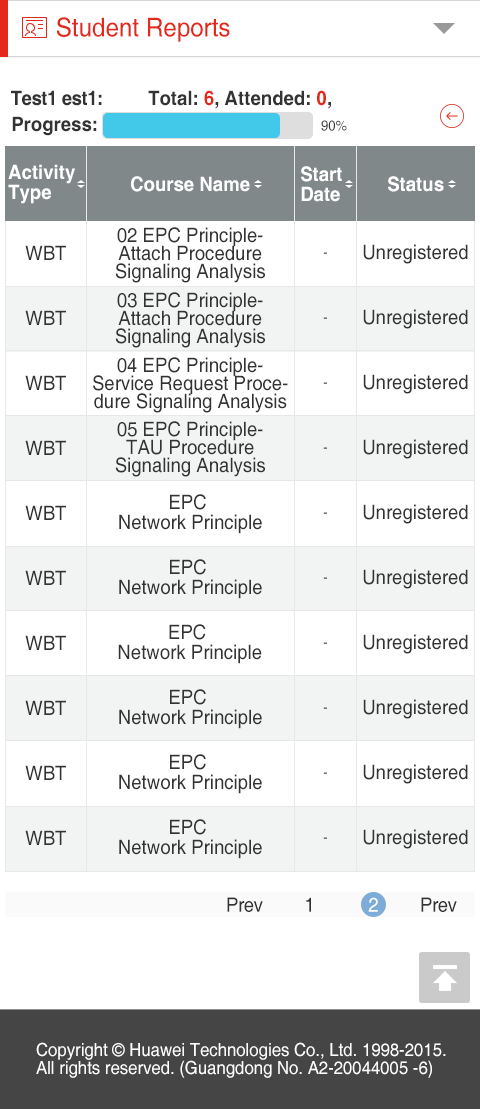
<style>
.page{position:relative;width:480px;height:1109px;background:#ffffff}
.page>*{position:absolute;margin:0}
.t1{font:26px "Helvetica";color:#e2291c;scale:0.93 1}
.t2{font:20px "Helvetica-Bold";letter-spacing:-0.025em;color:#333333;scale:0.93 1}
.t3{font:20px "Helvetica-Bold";color:#333333;scale:0.93 1}
.t4{font:20px "Helvetica-Bold";color:#e2291c;scale:0.93 1}
.t5{font:14px "Helvetica";color:#333333;scale:0.93 1}
.t6{font:20px/20px "Helvetica-Bold";color:#ffffff;scale:0.93 1}
.t7{font:20px "Helvetica-Bold";color:#ffffff;scale:0.93 1}
.t8{font:20px/18px "Helvetica";color:#333333;scale:0.93 1}
.t9{font:20px "Helvetica";color:#333333;scale:0.93 1}
.t10{font:14px "Helvetica";scale:0.93 1}
.t11{font:20px/20px "Helvetica";color:#333333;scale:0.93 1}
.t12{font:20px "Helvetica";letter-spacing:-0.025em;color:#333333;scale:0.93 1}
.t13{font:20px "Helvetica";letter-spacing:-0.025em;color:#ffffff;scale:0.93 1}
.t14{font:18px/18px "Helvetica";color:#fffefe;scale:0.93 1}
</style>
<div class="page">
<p class="t1" style="left:56px;top:17px;width:174px;height:25px">Student Reports</p>
<p class="t2" style="left:11px;top:90px;width:91px;height:16px">Test1 est1:</p>
<p class="t3" style="left:148px;top:90px;width:183px;height:19px">Total: <span class="t4">6</span>, Attended: <span class="t4">0</span>,</p>
<p class="t3" style="left:12px;top:116px;width:85px;height:20px">Progress:</p>
<p class="t5" style="left:321px;top:120px;width:26px;height:11px">90%</p>
<p class="t6" style="left:8px;top:164px;width:67px;height:40px">Activity <br>Type</p>
<p class="t6" style="left:301px;top:166px;width:41px;height:36px">Start<br>Date</p>
<p class="t7" style="left:131px;top:176px;width:119px;height:16px">Course Name</p>
<p class="t7" style="left:388px;top:176px;width:56px;height:16px">Status</p>
<p class="t8" style="left:115px;top:227px;width:150px;height:56px;text-align:center">02 EPC Principle-<br>Attach Procedure<br>Signaling Analysis</p>
<p class="t9" style="left:25px;top:245px;width:41px;height:15px">WBT</p>
<p class="t9" style="left:363px;top:244px;width:105px;height:20px">Unregistered</p>
<p class="t10" style="left:323px;top:252px;width:4px;height:2px">-</p>
<p class="t8" style="left:115px;top:292px;width:150px;height:56px;text-align:center">03 EPC Principle-<br>Attach Procedure<br>Signaling Analysis</p>
<p class="t9" style="left:25px;top:310px;width:41px;height:15px">WBT</p>
<p class="t10" style="left:323px;top:317px;width:4px;height:2px">-</p>
<p class="t9" style="left:363px;top:309px;width:105px;height:20px">Unregistered</p>
<p class="t8" style="left:93px;top:357px;width:195px;height:56px;text-align:center">04 EPC Principle-<br>Service Request Proce-<br>dure Signaling Analysis</p>
<p class="t9" style="left:25px;top:375px;width:41px;height:15px">WBT</p>
<p class="t9" style="left:363px;top:374px;width:105px;height:20px">Unregistered</p>
<p class="t10" style="left:323px;top:382px;width:4px;height:2px">-</p>
<p class="t8" style="left:115px;top:421px;width:150px;height:56px;text-align:center">05 EPC Principle-<br>TAU Procedure<br>Signaling Analysis</p>
<p class="t9" style="left:25px;top:440px;width:41px;height:15px">WBT</p>
<p class="t10" style="left:323px;top:447px;width:4px;height:2px">-</p>
<p class="t9" style="left:363px;top:439px;width:105px;height:20px">Unregistered</p>
<p class="t11" style="left:119px;top:494px;width:143px;height:40px;text-align:center">EPC <br>Network Principle</p>
<p class="t9" style="left:25px;top:505px;width:41px;height:15px">WBT</p>
<p class="t9" style="left:363px;top:504px;width:105px;height:20px">Unregistered</p>
<p class="t10" style="left:323px;top:512px;width:4px;height:2px">-</p>
<p class="t11" style="left:119px;top:559px;width:143px;height:40px;text-align:center">EPC <br>Network Principle</p>
<p class="t9" style="left:363px;top:569px;width:105px;height:20px">Unregistered</p>
<p class="t9" style="left:25px;top:570px;width:41px;height:15px">WBT</p>
<p class="t10" style="left:323px;top:577px;width:4px;height:2px">-</p>
<p class="t11" style="left:118px;top:624px;width:144px;height:40px;text-align:center">EPC<br> Network Principle</p>
<p class="t9" style="left:25px;top:635px;width:41px;height:15px">WBT</p>
<p class="t9" style="left:363px;top:634px;width:105px;height:20px">Unregistered</p>
<p class="t10" style="left:323px;top:642px;width:4px;height:2px">-</p>
<p class="t11" style="left:119px;top:689px;width:143px;height:40px;text-align:center">EPC <br>Network Principle</p>
<p class="t9" style="left:25px;top:700px;width:41px;height:15px">WBT</p>
<p class="t9" style="left:363px;top:699px;width:105px;height:20px">Unregistered</p>
<p class="t10" style="left:323px;top:707px;width:4px;height:2px">-</p>
<p class="t11" style="left:119px;top:754px;width:143px;height:40px;text-align:center">EPC <br>Network Principle</p>
<p class="t9" style="left:25px;top:765px;width:41px;height:15px">WBT</p>
<p class="t10" style="left:323px;top:772px;width:4px;height:2px">-</p>
<p class="t9" style="left:363px;top:764px;width:105px;height:20px">Unregistered</p>
<p class="t11" style="left:119px;top:819px;width:143px;height:40px;text-align:center">EPC <br>Network Principle</p>
<p class="t9" style="left:25px;top:830px;width:41px;height:15px">WBT</p>
<p class="t9" style="left:363px;top:829px;width:105px;height:20px">Unregistered</p>
<p class="t10" style="left:323px;top:837px;width:4px;height:2px">-</p>
<p class="t12" style="left:227px;top:897px;width:36px;height:15px">Prev</p>
<p class="t12" style="left:306px;top:897px;width:5px;height:15px">1</p>
<p class="t13" style="left:368px;top:897px;width:10px;height:15px">2</p>
<p class="t12" style="left:421px;top:897px;width:36px;height:15px">Prev</p>
<p class="t14" style="left:36px;top:1042px;width:410px;height:36px">Copyright © Huawei Technologies Co., Ltd. 1998-2015. <br>All rights reserved. (Guangdong No. A2-20044005 -6)</p>
</div>
